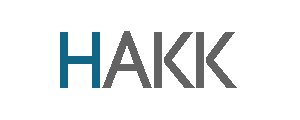
<style>
.page{position:relative;width:300px;height:120px;background:#ffffff}
.page>*{position:absolute;margin:0}
.t1{font:79px "Code-Bold";color:#636363}
.t2{font:79px "Code-Bold";color:#106684}
</style>
<div class="page">
<p class="t1" style="left:60px;top:31px;width:177px;height:57px"><span class="t2">h</span>akk</p>
</div>
